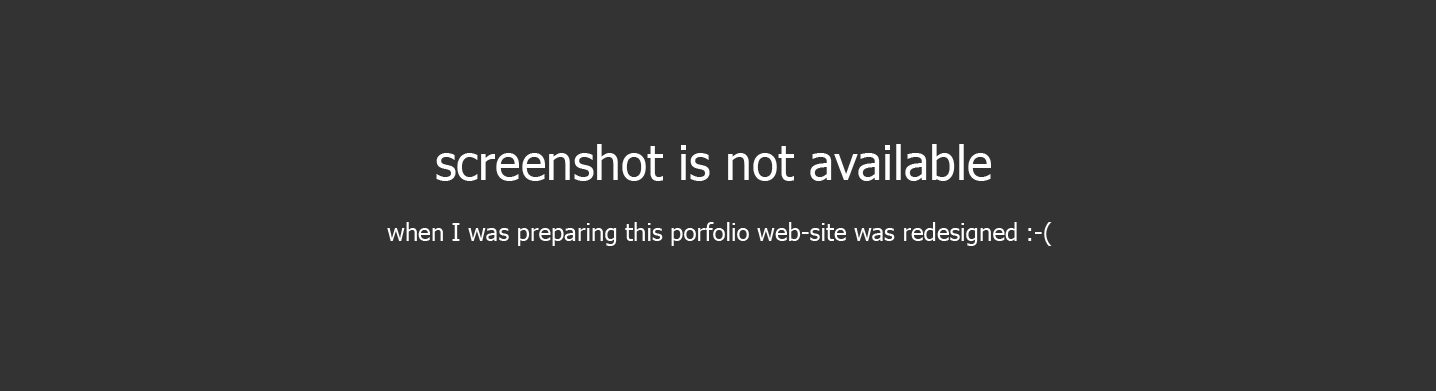
<style>
.page{position:relative;width:1436px;height:391px;background:#333333}
.page>*{position:absolute;margin:0}
.t1{font:48px "Tahoma";color:#ffffff}
.t2{font:24px "Tahoma";color:#ffffff}
</style>
<div class="page">
<p class="t1" style="left:436px;top:144px;width:555px;height:37px">screenshot is not available</p>
<p class="t2" style="left:387px;top:222px;width:665px;height:24px">when I was preparing this porfolio web-site was redesigned :-(</p>
</div>
